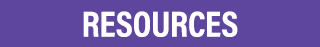
<style>
.page{position:relative;width:320px;height:47px;background:#5e469f}
.page>*{position:absolute;margin:0}
.t1{font:36.3px "AcuminProCond-Bold";color:#ffffff;text-transform:uppercase}
</style>
<div class="page">
<p class="t1" style="left:83px;top:11px;width:155px;height:26px">Resources</p>
</div>
